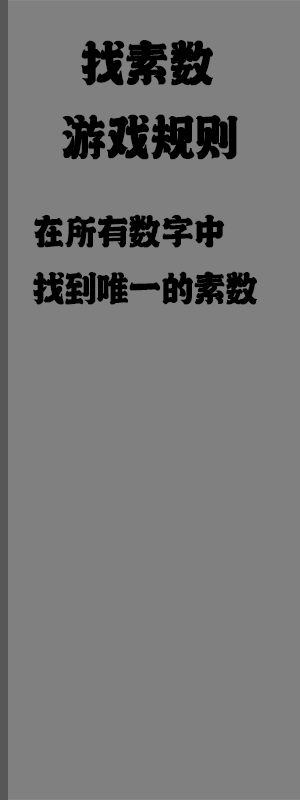
<style>
.page{position:relative;width:300px;height:800px;background:#808080}
.page>*{position:absolute;margin:0}
.t1{font:57.1px "-";letter-spacing:-0.02em;color:#000000;font-weight:bold;scale:0.88 1}
.t2{font:41.7px/57.1px "-";letter-spacing:-0.02em;color:#000000;font-weight:bold;scale:0.88 1}
</style>
<div class="page">
<p class="t1" style="left:81px;top:40px;width:132px;height:46px">找素数</p>
<p class="t1" style="left:62px;top:114px;width:176px;height:46px">游戏规则</p>
<p class="t2" style="left:33px;top:214px;width:224px;height:91px">在所有数字中<br>找到唯一的素数</p>
</div>
